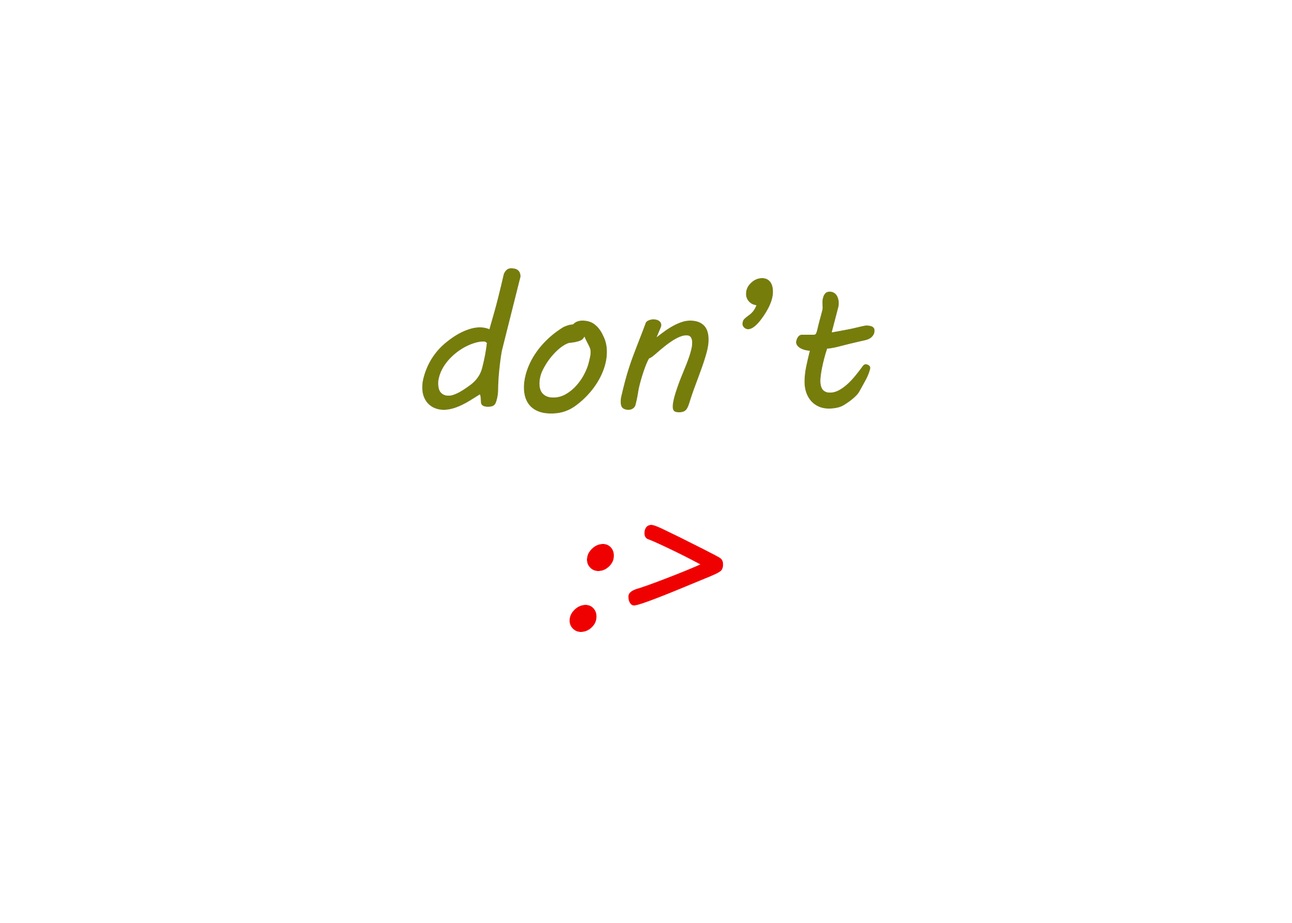
<style>
.page{position:relative;width:1292px;height:923px;background:#ffffff}
.page>*{position:absolute;margin:0}
.t1{font:184.6px "MVBoli";color:#767d0b}
.t2{font:184.6px "MVBoli";color:#f00101}
</style>
<div class="page">
<p class="t1" style="left:422px;top:268px;width:453px;height:364px;text-align:center">don’t <br><span class="t2">:&gt;</span></p>
</div>
